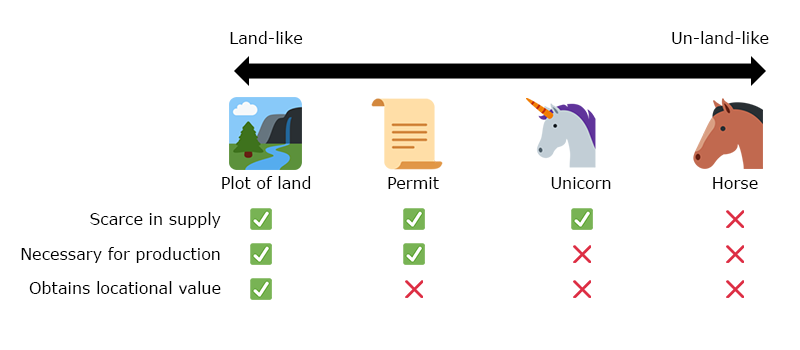
<style>
.page{position:relative;width:800px;height:350px;background:#ffffff}
.page>*{position:absolute;margin:0}
.t1{font:12px "Verdana";color:#000000}
.t2{font:12px/34.7px "Verdana";color:#000000}
</style>
<div class="page">
<p class="t1" style="left:230px;top:31px;width:73px;height:13px">Land-like</p>
<p class="t1" style="left:672px;top:31px;width:97px;height:13px">Un-land-like</p>
<p class="t1" style="left:222px;top:176px;width:89px;height:13px">Plot of land</p>
<p class="t1" style="left:388px;top:177px;width:51px;height:12px">Permit</p>
<p class="t1" style="left:551px;top:177px;width:60px;height:12px">Unicorn</p>
<p class="t1" style="left:713px;top:177px;width:45px;height:12px">Horse</p>
<p class="t2" style="left:21px;top:212px;width:200px;height:120px;text-align:right">Scarce in supply<br>Necessary for production<br>Obtains locational value<br>Non-fungible (unique)</p>
</div>
